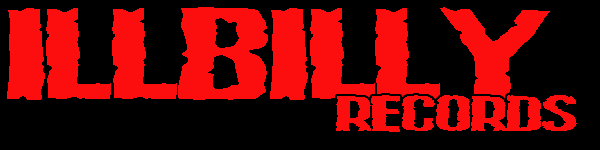
<style>
.page{position:relative;width:600px;height:150px;background:#000000}
.page>*{position:absolute;margin:0}
.t1{font:100px "VulgarDisplayOfPower";color:#fd0e0e}
.t2{font:38.9px "VulgarDisplayOfPower";color:#ffffff}
.t3{font:38.9px "VulgarDisplayOfPower";color:#fd0e0e}
</style>
<div class="page">
<p class="t1" style="left:7px;top:7px;width:543px;height:93px"><span class="t2"><br></span>ILLBILLY</p>
<p class="t3" style="left:336px;top:95px;width:241px;height:37px">RECORDS</p>
</div>
